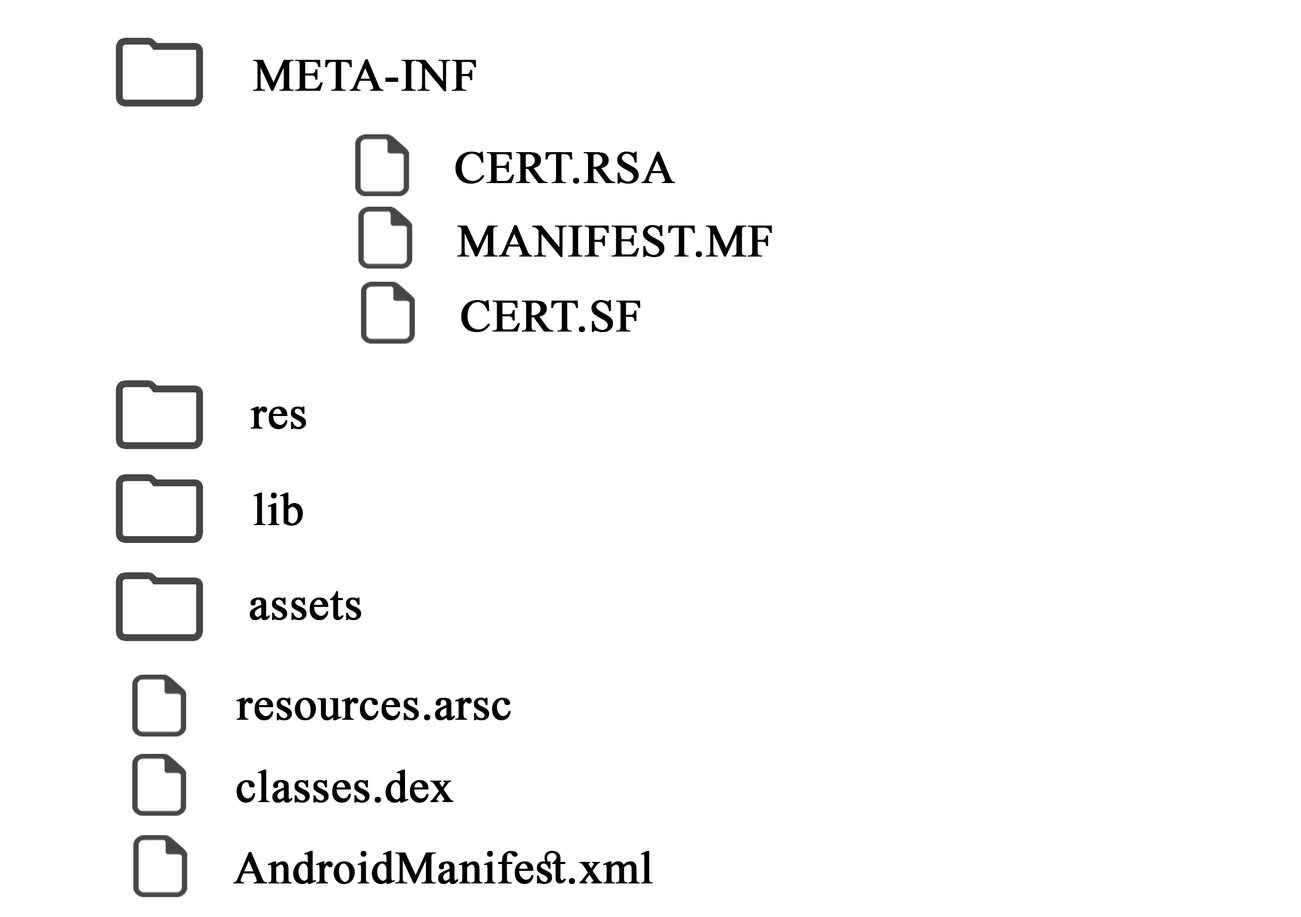
<style>
.page{position:relative;width:1301px;height:917px;background:#ffffff}
.page>*{position:absolute;margin:0}
.t1{font:45.9px "TimesNewRomanPSMT";color:#000000;font-weight:bold}
</style>
<div class="page">
<p class="t1" style="left:253px;top:59px;width:223px;height:32px">META-INF</p>
<p class="t1" style="left:455px;top:152px;width:220px;height:32px">CERT.RSA</p>
<p class="t1" style="left:457px;top:225px;width:315px;height:32px">MANIFEST.MF</p>
<p class="t1" style="left:461px;top:300px;width:179px;height:32px">CERT.SF</p>
<p class="t1" style="left:250px;top:406px;width:56px;height:23px">res</p>
<p class="t1" style="left:253px;top:492px;width:50px;height:34px">lib</p>
<p class="t1" style="left:250px;top:591px;width:111px;height:29px">assets</p>
<p class="t1" style="left:236px;top:698px;width:275px;height:22px">resources.arsc</p>
<p class="t1" style="left:237px;top:769px;width:217px;height:33px">classes.dex</p>
<p class="t1" style="left:233px;top:851px;width:419px;height:33px">AndroidManifest.xml</p>
</div>
